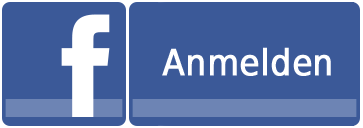
<style>
.page{position:relative;width:363px;height:128px;background:#3b5998}
.page>*{position:absolute;margin:0}
.t1{font:36px "DejaVuSansCondensed";color:#ffffff;font-weight:bold}
</style>
<div class="page">
<p class="t1" style="left:162px;top:47px;width:169px;height:29px">Anmelden</p>
</div>
